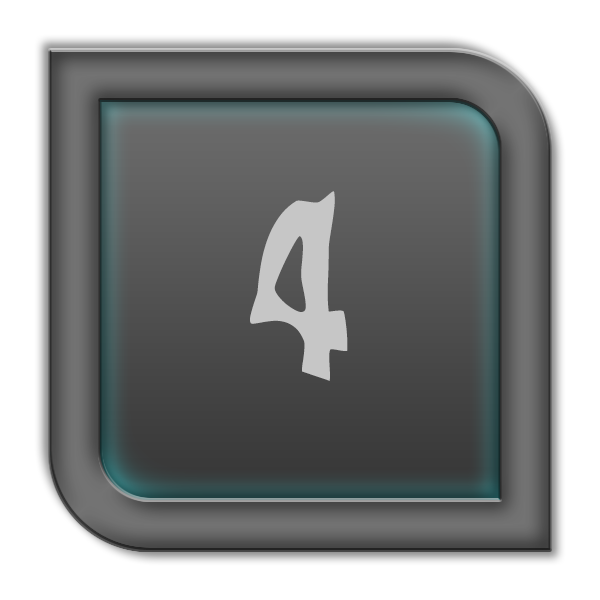
<style>
.page{position:relative;width:600px;height:600px;background:#ffffff}
.page>*{position:absolute;margin:0}
.t1{font:300px "WILD2GhixmNC";color:#c6c6c6;scale:0.83 1}
</style>
<div class="page">
<p class="t1" style="left:250px;top:191px;width:98px;height:190px">4</p>
</div>
